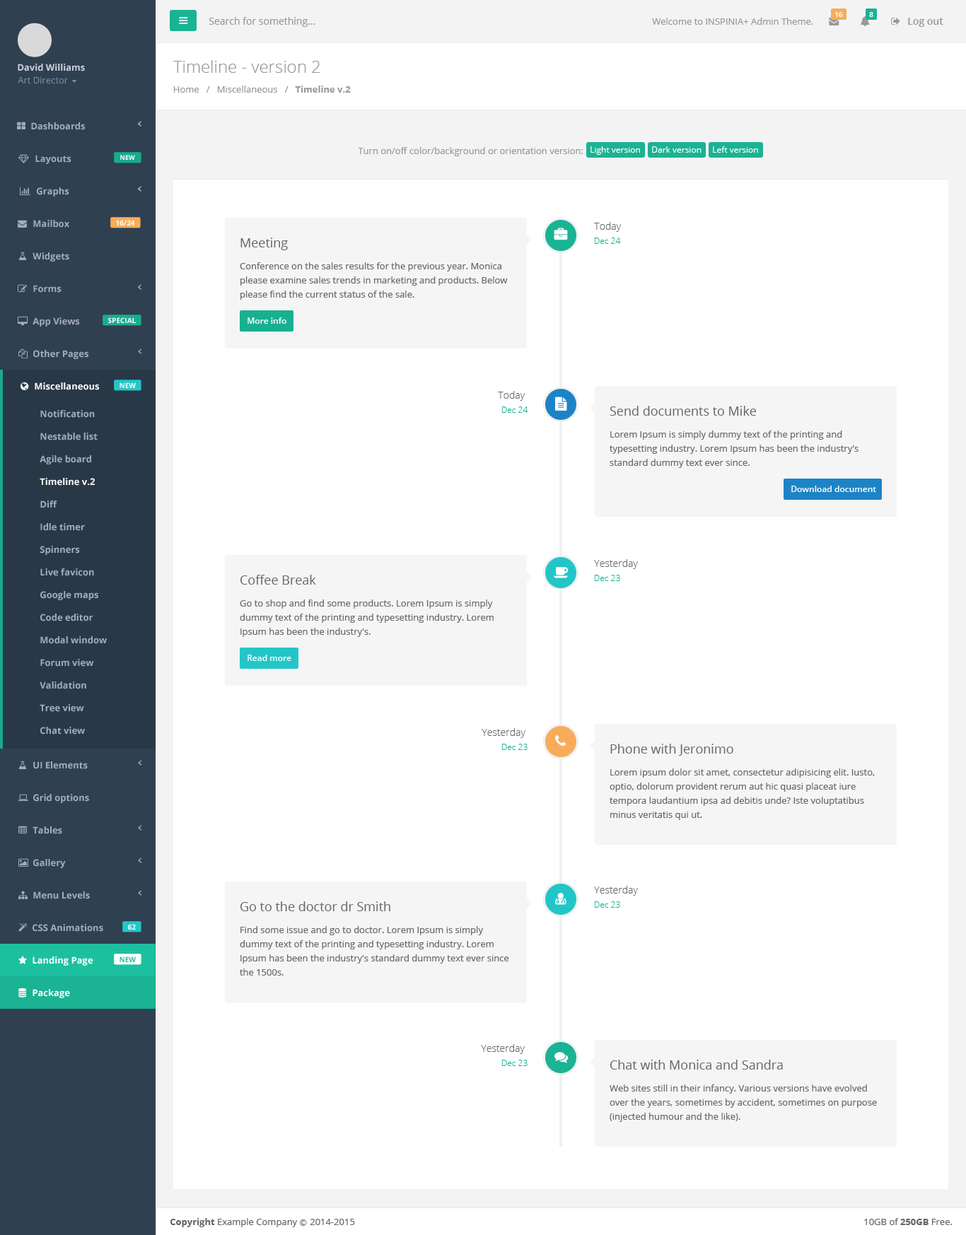
<style>
.page{position:relative;width:966px;height:1235px;background:#ffffff}
.page>*{position:absolute;margin:0}
.t1{font:9.9px "OpenSans";color:#999999}
.t2{font:9.2px "OpenSans";color:#999999}
.t3{font:7.1px "OpenSans-Semibold";color:#ffffff}
.t4{font:9.9px "OpenSans-Semibold";color:#999999}
.t5{font:9.2px "OpenSans-Bold";color:#cad1db}
.t6{font:17px "OpenSans-Light";color:#999999}
.t7{font:9.2px "OpenSans";color:#7d93a5}
.t8{font:9.2px "OpenSans-Bold";color:#999999}
.t9{font:9.2px "OpenSans-Bold";color:#a2acbd}
.t10{font:8.5px "OpenSans";color:#ffffff}
.t11{font:6.4px "OpenSans-Bold";color:#fefefe}
.t12{font:7.1px "OpenSans-Bold";color:#fefefe}
.t13{font:9.9px "OpenSans-Light";color:#676a6c}
.t14{font:12.7px "OpenSans";color:#676a6c}
.t15{font:8.5px "OpenSans-Light";color:#1ab394}
.t16{font:9.2px/14.1px "OpenSans";color:#676a6c}
.t17{font:8.5px "OpenSans-Semibold";color:#ffffff}
.t18{font:9.2px "OpenSans-Bold";color:#ffffff}
.t19{font:7.1px "OpenSans-Bold";color:#1cc09f}
.t20{font:9.2px "OpenSans";color:#666666}
.t21{font:9.2px "OpenSans-Bold";color:#666666}
.t22{font:7.1px "Meiryo";color:#666666}
</style>
<div class="page">
<p class="t1" style="left:209px;top:17px;width:106px;height:10px">Search for something...</p>
<p class="t2" style="left:652px;top:18px;width:161px;height:7px">Welcome to INSPINIA+ Admin Theme.</p>
<p class="t3" style="left:835px;top:12px;width:8px;height:5px">16</p>
<p class="t3" style="left:869px;top:12px;width:4px;height:5px">8</p>
<p class="t4" style="left:908px;top:18px;width:35px;height:9px">Log out</p>
<p class="t5" style="left:18px;top:64px;width:67px;height:7px">David Williams</p>
<p class="t6" style="left:173px;top:60px;width:147px;height:13px">Timeline - version 2</p>
<p class="t7" style="left:18px;top:76px;width:50px;height:8px">Art Director</p>
<p class="t2" style="left:173px;top:86px;width:178px;height:7px">Home   /   Miscellaneous   /   <span class="t8">Timeline v.2</span></p>
<p class="t9" style="left:31px;top:122px;width:54px;height:8px">Dashboards</p>
<p class="t2" style="left:358px;top:147px;width:225px;height:9px">Turn on/off color/background or orientation version:</p>
<p class="t10" style="left:590px;top:146px;width:50px;height:9px">Light version</p>
<p class="t10" style="left:652px;top:146px;width:49px;height:7px">Dark version</p>
<p class="t10" style="left:713px;top:146px;width:45px;height:7px">Left version</p>
<p class="t9" style="left:35px;top:155px;width:36px;height:9px">Layouts</p>
<p class="t11" style="left:120px;top:155px;width:15px;height:5px">NEW</p>
<p class="t9" style="left:37px;top:187px;width:32px;height:10px">Graphs</p>
<p class="t9" style="left:33px;top:220px;width:36px;height:8px">Mailbox</p>
<p class="t12" style="left:116px;top:220px;width:19px;height:5px">16/24</p>
<p class="t13" style="left:594px;top:222px;width:27px;height:10px">Today</p>
<p class="t14" style="left:240px;top:238px;width:48px;height:12px">Meeting</p>
<p class="t15" style="left:594px;top:238px;width:27px;height:6px">Dec 24</p>
<p class="t9" style="left:33px;top:252px;width:36px;height:10px">Widgets</p>
<p class="t16" style="left:240px;top:262px;width:268px;height:38px">Conference on the sales results for the previous year. Monica please examine sales trends in marketing and products. Below please find the current status of the sale.</p>
<p class="t9" style="left:33px;top:285px;width:28px;height:8px">Forms</p>
<p class="t9" style="left:33px;top:317px;width:47px;height:10px">App Views</p>
<p class="t12" style="left:108px;top:317px;width:28px;height:6px">SPECIAL</p>
<p class="t17" style="left:247px;top:317px;width:39px;height:7px">More info</p>
<p class="t9" style="left:33px;top:350px;width:55px;height:9px">Other Pages</p>
<p class="t18" style="left:35px;top:382px;width:64px;height:8px">Miscellaneous</p>
<p class="t12" style="left:119px;top:382px;width:17px;height:6px">NEW</p>
<p class="t13" style="left:498px;top:391px;width:27px;height:10px">Today</p>
<p class="t9" style="left:40px;top:410px;width:55px;height:8px">Notification</p>
<p class="t15" style="left:501px;top:406px;width:27px;height:7px">Dec 24</p>
<p class="t14" style="left:609px;top:406px;width:147px;height:10px">Send documents to Mike</p>
<p class="t9" style="left:40px;top:433px;width:58px;height:7px">Nestable list</p>
<p class="t16" style="left:609px;top:430px;width:249px;height:38px">Lorem Ipsum is simply dummy text of the printing and typesetting industry. Lorem Ipsum has been the industry's standard dummy text ever since.</p>
<p class="t9" style="left:40px;top:455px;width:51px;height:9px">Agile board</p>
<p class="t18" style="left:40px;top:478px;width:55px;height:8px">Timeline v.2</p>
<p class="t17" style="left:791px;top:486px;width:85px;height:6px">Download document</p>
<p class="t9" style="left:40px;top:500px;width:17px;height:8px">Diff</p>
<p class="t9" style="left:40px;top:523px;width:45px;height:8px">Idle timer</p>
<p class="t9" style="left:40px;top:546px;width:40px;height:9px">Spinners</p>
<p class="t9" style="left:40px;top:568px;width:54px;height:8px">Live favicon</p>
<p class="t13" style="left:594px;top:559px;width:44px;height:10px">Yesterday</p>
<p class="t14" style="left:240px;top:575px;width:76px;height:10px">Coffee Break</p>
<p class="t15" style="left:594px;top:575px;width:26px;height:6px">Dec 23</p>
<p class="t9" style="left:40px;top:591px;width:58px;height:9px">Google maps</p>
<p class="t16" style="left:240px;top:599px;width:253px;height:38px">Go to shop and find some products. Lorem Ipsum is simply dummy text of the printing and typesetting industry. Lorem Ipsum has been the industry's.</p>
<p class="t9" style="left:40px;top:614px;width:53px;height:7px">Code editor</p>
<p class="t9" style="left:40px;top:636px;width:67px;height:8px">Modal window</p>
<p class="t9" style="left:40px;top:659px;width:54px;height:8px">Forum view</p>
<p class="t17" style="left:247px;top:655px;width:44px;height:6px">Read more</p>
<p class="t9" style="left:40px;top:681px;width:46px;height:8px">Validation</p>
<p class="t9" style="left:40px;top:704px;width:44px;height:8px">Tree view</p>
<p class="t9" style="left:40px;top:727px;width:45px;height:7px">Chat view</p>
<p class="t13" style="left:481px;top:728px;width:44px;height:10px">Yesterday</p>
<p class="t15" style="left:501px;top:744px;width:26px;height:6px">Dec 23</p>
<p class="t14" style="left:610px;top:744px;width:123px;height:12px">Phone with Jeronimo</p>
<p class="t9" style="left:33px;top:761px;width:55px;height:8px">UI Elements</p>
<p class="t16" style="left:609px;top:768px;width:265px;height:52px">Lorem ipsum dolor sit amet, consectetur adipisicing elit. Iusto, optio, dolorum provident rerum aut hic quasi placeat iure tempora laudantium ipsa ad debitis unde? Iste voluptatibus minus veritatis qui ut.</p>
<p class="t9" style="left:33px;top:794px;width:56px;height:9px">Grid options</p>
<p class="t9" style="left:33px;top:826px;width:29px;height:8px">Tables</p>
<p class="t9" style="left:33px;top:859px;width:33px;height:9px">Gallery</p>
<p class="t9" style="left:33px;top:891px;width:57px;height:8px">Menu Levels</p>
<p class="t13" style="left:594px;top:886px;width:44px;height:10px">Yesterday</p>
<p class="t14" style="left:240px;top:901px;width:150px;height:10px">Go to the doctor dr Smith</p>
<p class="t15" style="left:594px;top:901px;width:26px;height:7px">Dec 23</p>
<p class="t9" style="left:33px;top:924px;width:70px;height:8px">CSS Animations</p>
<p class="t12" style="left:127px;top:924px;width:9px;height:6px">62</p>
<p class="t16" style="left:240px;top:926px;width:269px;height:49px">Find some issue and go to doctor. Lorem Ipsum is simply dummy text of the printing and typesetting industry. Lorem Ipsum has been the industry's standard dummy text ever since the 1500s.</p>
<p class="t18" style="left:33px;top:956px;width:60px;height:10px">Landing Page</p>
<p class="t19" style="left:119px;top:956px;width:17px;height:6px">NEW</p>
<p class="t18" style="left:33px;top:989px;width:37px;height:9px">Package</p>
<p class="t13" style="left:481px;top:1044px;width:44px;height:10px">Yesterday</p>
<p class="t15" style="left:501px;top:1060px;width:26px;height:6px">Dec 23</p>
<p class="t14" style="left:610px;top:1060px;width:173px;height:10px">Chat with Monica and Sandra</p>
<p class="t16" style="left:609px;top:1084px;width:268px;height:38px">Web sites still in their infancy. Various versions have evolved over the years, sometimes by accident, sometimes on purpose (injected humour and the like).</p>
<p class="t20" style="left:170px;top:1218px;width:185px;height:9px"><span class="t21">Copyright</span> Example Company <span class="t22">Ⓒ </span>2014-2015</p>
<p class="t20" style="left:864px;top:1218px;width:88px;height:7px">10GB of <span class="t21">250GB</span> Free.</p>
</div>
